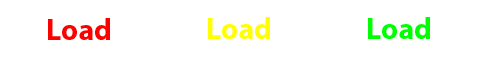
<style>
.page{position:relative;width:480px;height:60px;background:#ffffff}
.page>*{position:absolute;margin:0}
.t1{font:30px "MyriadPro-Bold";color:#ffff00}
.t2{font:30px "MyriadPro-Bold";color:#00ff00}
.t3{font:30px "MyriadPro-Bold";color:#ff0000}
</style>
<div class="page">
<p class="t1" style="left:208px;top:17px;width:62px;height:22px">Load</p>
<p class="t2" style="left:368px;top:17px;width:62px;height:22px">Load</p>
<p class="t3" style="left:48px;top:18px;width:62px;height:22px">Load</p>
</div>
